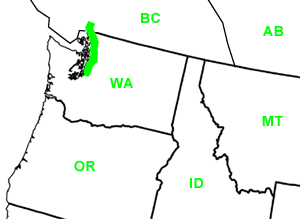
<style>
.page{position:relative;width:300px;height:219px;background:#ffffff}
.page>*{position:absolute;margin:0}
.t1{font:14px "Arial-BoldMT";letter-spacing:0.05em;color:#00ff00}
</style>
<div class="page">
<p class="t1" style="left:141px;top:12px;width:19px;height:11px">BC</p>
<p class="t1" style="left:263px;top:26px;width:21px;height:10px">AB</p>
<p class="t1" style="left:110px;top:78px;width:23px;height:10px">WA</p>
<p class="t1" style="left:262px;top:116px;width:21px;height:10px">MT</p>
<p class="t1" style="left:74px;top:160px;width:22px;height:12px">OR</p>
<p class="t1" style="left:190px;top:178px;width:13px;height:10px">ID</p>
</div>
